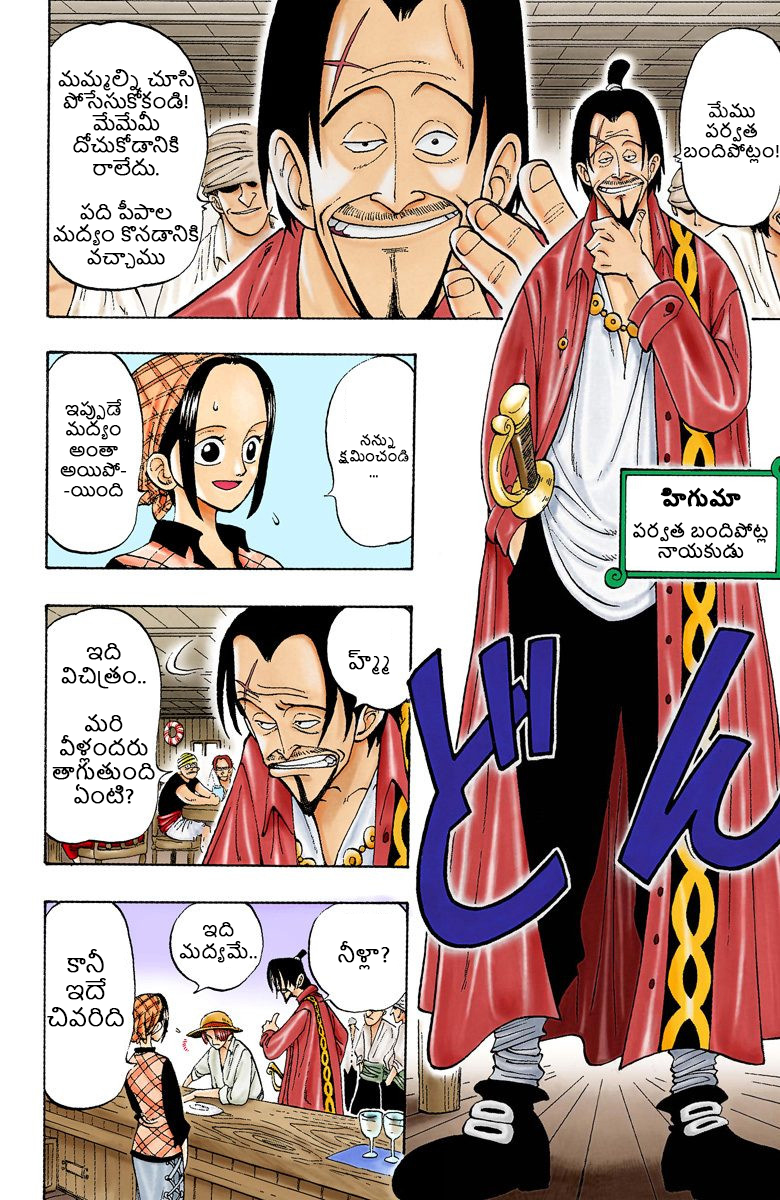
<style>
.page{position:relative;width:780px;height:1200px;background:#ffffff}
.page>*{position:absolute;margin:0}
.t1{font:18.5px "NirmalaUI";color:#000000;font-weight:bold}
.t2{font:17px "NirmalaUI";color:#000000;font-weight:bold}
.t3{font:16.7px "NirmalaUI";color:#000000;font-weight:bold}
.t4{font:13px "NirmalaUI";color:#000000;font-weight:bold}
.t5{font:20px "NirmalaUI-Bold";color:#000000;font-weight:bold}
.t6{font:20px "NirmalaUI";color:#000000;font-weight:bold}
.t7{font:20.7px "NirmalaUI";color:#000000;font-weight:bold}
.t8{font:18.3px "NirmalaUI";color:#000000;font-weight:bold}
.t9{font:22.6px "NirmalaUI";color:#000000;font-weight:bold}
</style>
<div class="page">
<p class="t1" style="left:53px;top:69px;width:146px;height:200px;text-align:center">మమ్మల్ని చూసి పోసేసుకోకండి! <br>మేమేమీ <br>దోచుకోడానికి <br>రాలేదు.<br><br>పది పీపాల <br>మద్యం కొనడానికి వచ్చాము</p>
<p class="t2" style="left:683px;top:100px;width:96px;height:63px;text-align:center">మేము <br>పర్వత బందిపోట్లం!</p>
<p class="t3" style="left:60px;top:398px;width:67px;height:99px;text-align:center">ఇప్పుడే <br>మద్యం <br>అంతా అయిపో-<br>-యింది</p>
<p class="t4" style="left:338px;top:434px;width:71px;height:44px;text-align:center">నన్ను క్షమించండి<br>...</p>
<p class="t2" style="left:633px;top:487px;width:135px;height:72px;text-align:center"><span class="t5">హిగుమా<br><br><br><br></span>పర్వత బందిపోట్ల నాయకుడు</p>
<p class="t6" style="left:52px;top:643px;width:103px;height:161px;text-align:center">ఇది <br>విచిత్రం.. <br><br>మరి <br>వీళ్లందరు తాగుతుంది ఏంటి?</p>
<p class="t7" style="left:348px;top:650px;width:42px;height:25px">హ్మ్మ్</p>
<p class="t8" style="left:179px;top:922px;width:78px;height:41px;text-align:center">ఇది మద్యమే..</p>
<p class="t7" style="left:338px;top:941px;width:52px;height:29px">నీళ్లా?</p>
<p class="t9" style="left:47px;top:949px;width:77px;height:78px;text-align:center">కానీ <br>ఇదే చివరిది</p>
</div>
